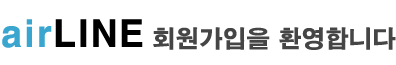
<style>
.page{position:relative;width:396px;height:65px;background:#ffffff}
.page>*{position:absolute;margin:0}
.t1{font:23.6px "H2gtrE";color:#454545}
.t2{font:36px "H2gtrE";color:#3aa6d0}
.t3{font:36px "H2gtrE";color:#000000}
</style>
<div class="page">
<p class="t1" style="left:2px;top:19px;width:394px;height:31px"><span class="t2">air</span><span class="t3">LINE </span>회원가입을 환영합니다</p>
</div>
